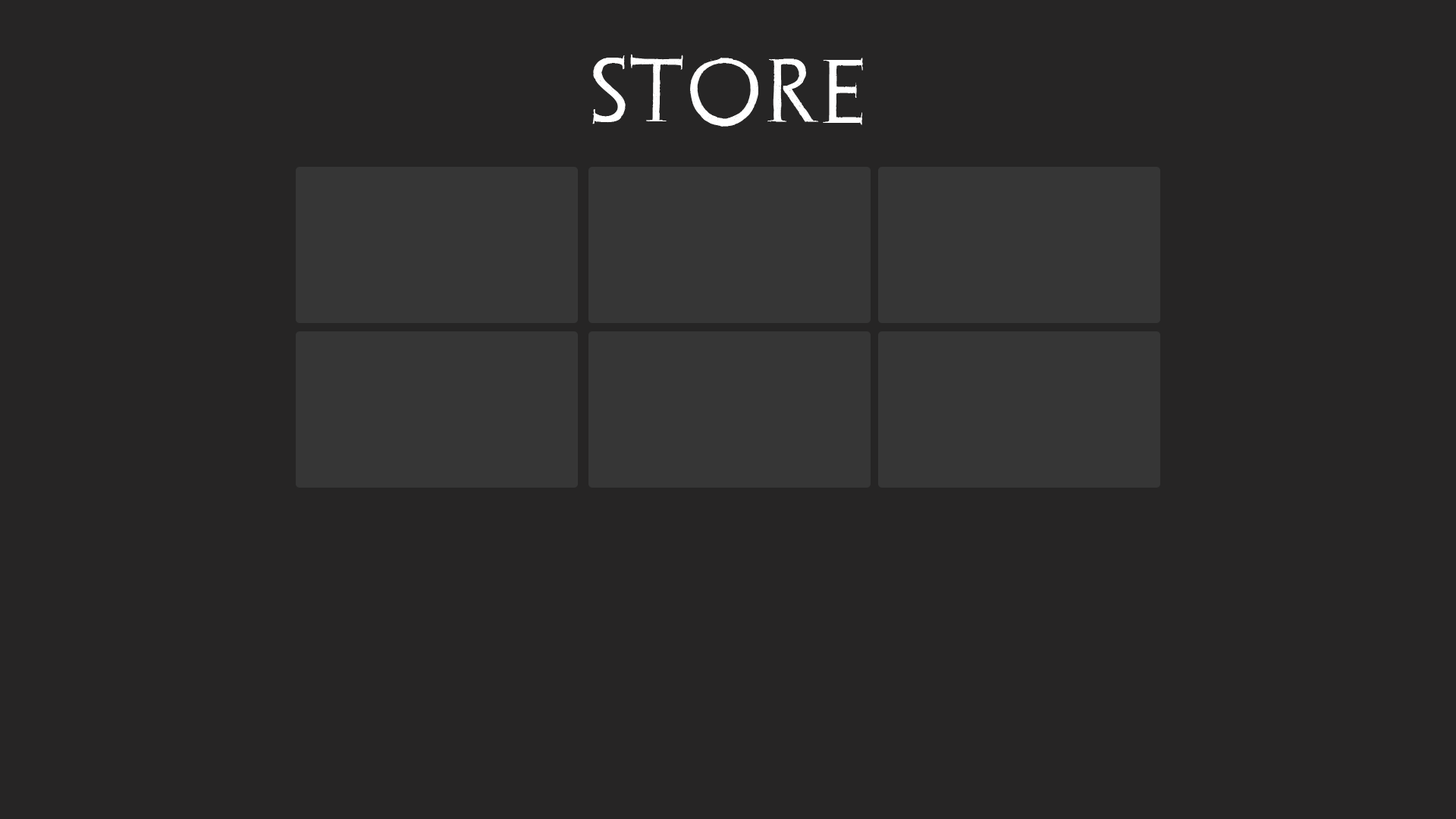
<style>
.page{position:relative;width:1456px;height:819px;background:#262525}
.page>*{position:absolute;margin:0}
.t1{font:75.8px "Archeologicaps";color:#ffffff}
</style>
<div class="page">
<p class="t1" style="left:592px;top:54px;width:271px;height:73px">store</p>
</div>
